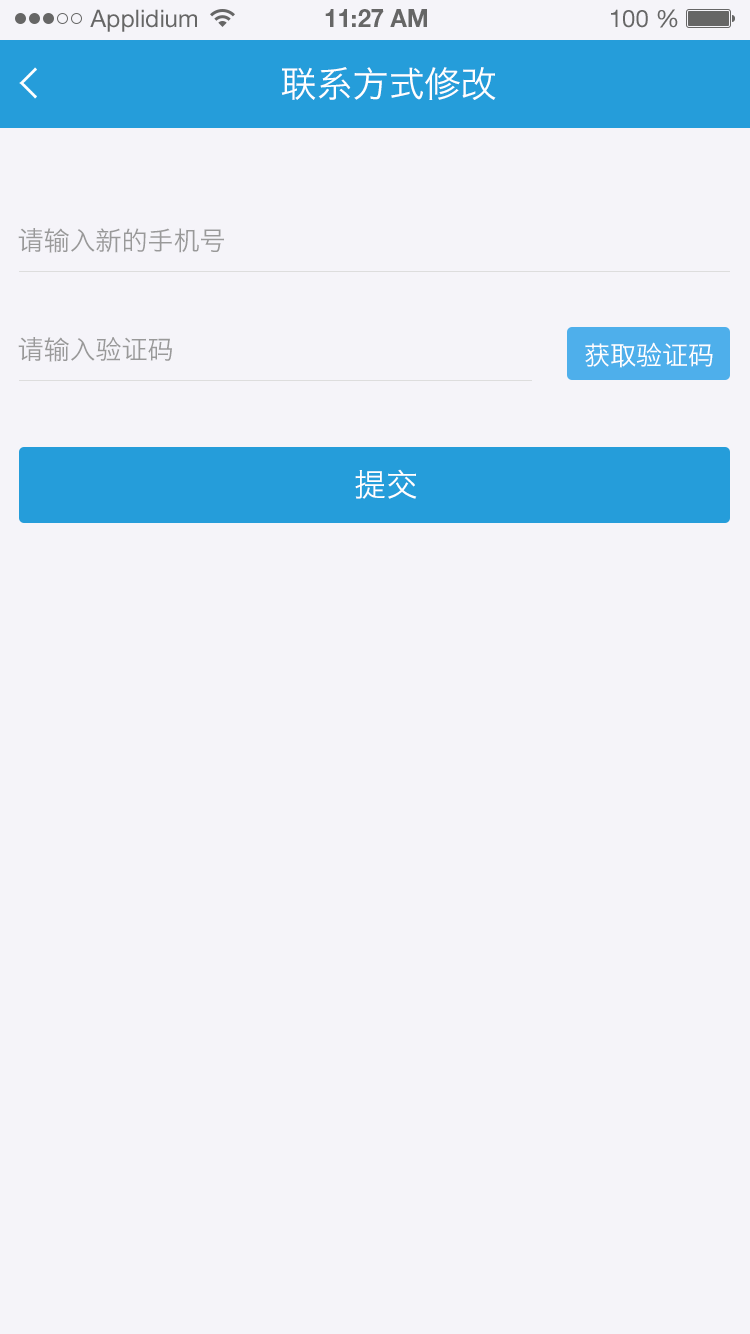
<style>
.page{position:relative;width:750px;height:1334px;background:#f5f4f9}
.page>*{position:absolute;margin:0}
.t1{font:24px "HelveticaNeueLTStd-Roman";color:#666666}
.t2{font:24px "HelveticaNeueLTStd-Bd";color:#666666}
.t3{font:36px "HiraginoSansGB-W3";color:#ffffff;text-transform:uppercase}
.t4{font:26px "HiraginoSansGB-W3";color:#999999;text-transform:uppercase}
.t5{font:26px "HiraginoSansGB-W3";color:#ffffff;text-transform:uppercase}
.t6{font:32px "HiraginoSansGB-W3";color:#ffffff;text-transform:uppercase}
</style>
<div class="page">
<p class="t1" style="left:90px;top:9px;width:107px;height:23px">Applidium</p>
<p class="t2" style="left:325px;top:9px;width:102px;height:18px">11:27 AM</p>
<p class="t1" style="left:611px;top:9px;width:67px;height:19px">100 %</p>
<p class="t3" style="left:281px;top:67px;width:215px;height:33px">联系方式修改</p>
<p class="t4" style="left:18px;top:228px;width:206px;height:25px">请输入新的手机号</p>
<p class="t4" style="left:18px;top:337px;width:154px;height:25px">请输入验证码</p>
<p class="t5" style="left:585px;top:342px;width:128px;height:26px">获取验证码</p>
<p class="t6" style="left:355px;top:469px;width:62px;height:30px">提交</p>
</div>
